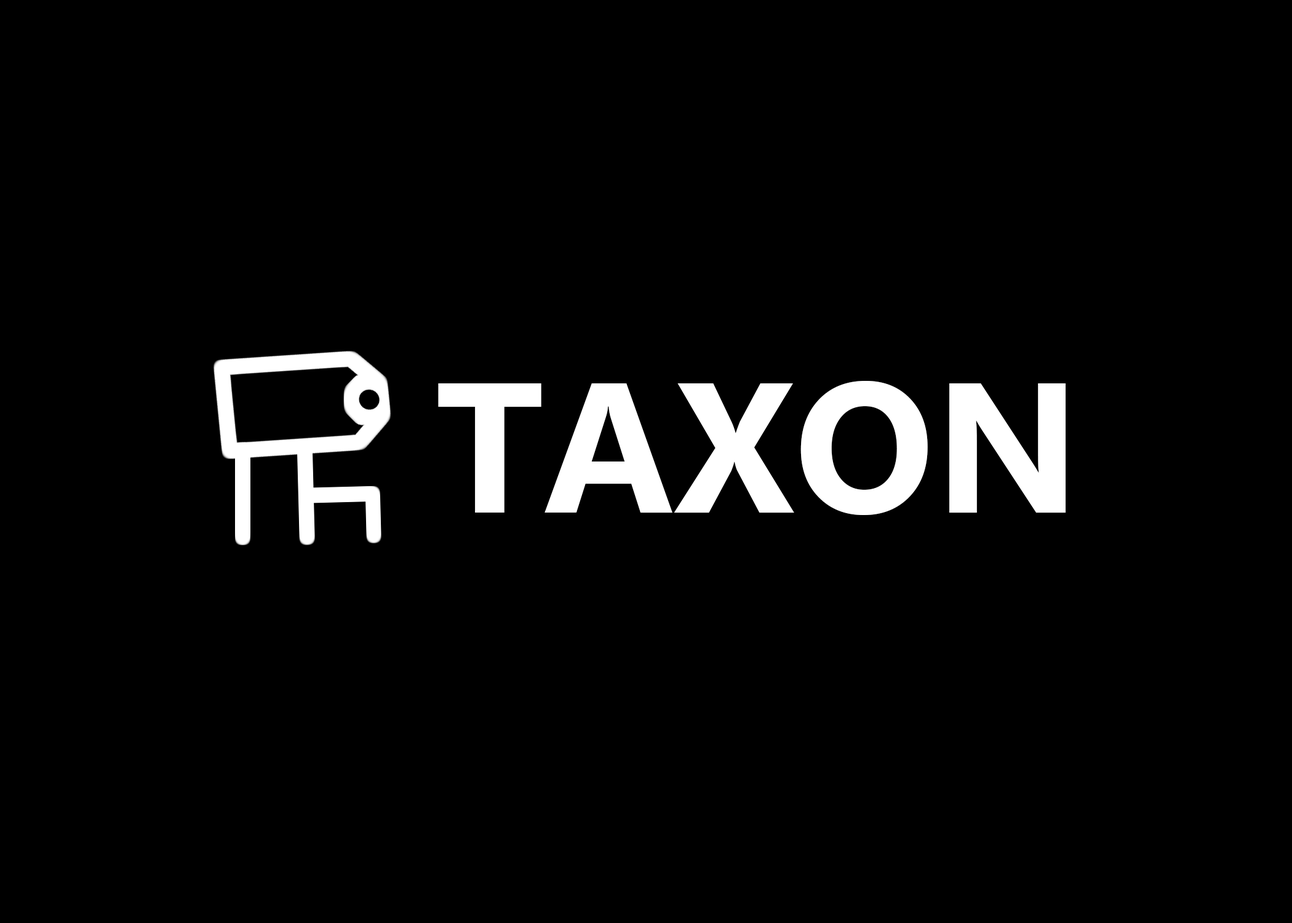
<style>
.page{position:relative;width:1292px;height:923px;background:#000000}
.page>*{position:absolute;margin:0}
.t1{font:184.6px "LaoUI-Bold";color:#ffffff}
</style>
<div class="page">
<p class="t1" style="left:438px;top:381px;width:628px;height:134px">TAXON</p>
</div>
